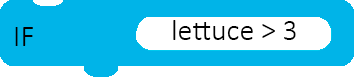
<style>
.page{position:relative;width:354px;height:77px;background:#00b4e8}
.page>*{position:absolute;margin:0}
.t1{font:30px "Calibri-Light";color:#000000}
</style>
<div class="page">
<p class="t1" style="left:15px;top:27px;width:18px;height:19px">IF</p>
<p class="t1" style="left:173px;top:20px;width:123px;height:20px">lettuce &gt; 3</p>
</div>
